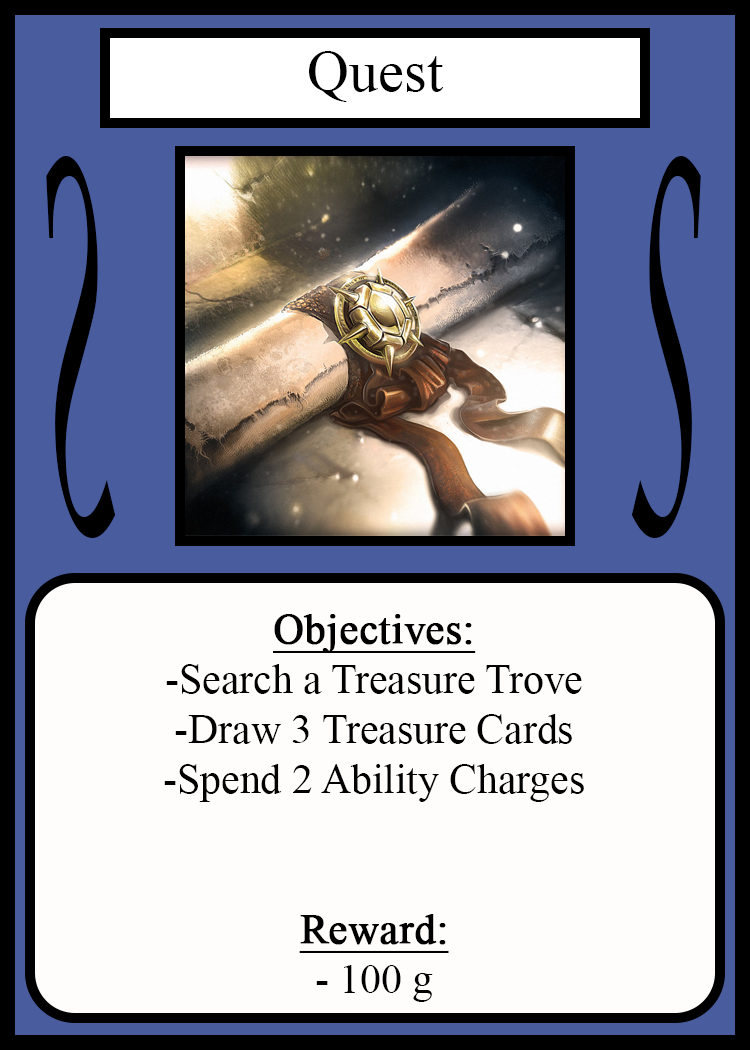
<style>
.page{position:relative;width:750px;height:1050px;background:#fffcfc}
.page>*{position:absolute;margin:0}
.t1{font:58.3px "TimesNewRomanPSMT";color:#010101}
.t2{font:504.3px "LucidaCalligraphy-Italic";color:#000000;scale:0.24 1}
.t3{font:504.1px "LucidaCalligraphy-Italic";color:#000000;scale:0.24 1}
.t4{font:41.7px "TimesNewRomanPSMT";color:#000000}
.t5{font:41.7px "TimesNewRomanPSMT";color:#000000;font-weight:bold;text-decoration:underline}
</style>
<div class="page">
<p class="t1" style="left:309px;top:51px;width:135px;height:51px">Quest</p>
<p class="t2" style="left:46px;top:156px;width:70px;height:382px;rotate:180deg">S</p>
<p class="t3" style="left:631px;top:156px;width:70px;height:382px">S</p>
<p class="t4" style="left:164px;top:614px;width:420px;height:388px;text-align:center"><span class="t5">Objectives:<br></span>-Search a Treasure Trove<br>-Draw 3 Treasure Cards<br>-Spend 2 Ability Charges<br><br><br><span class="t5">Reward:</span><br>- 100 g</p>
</div>
